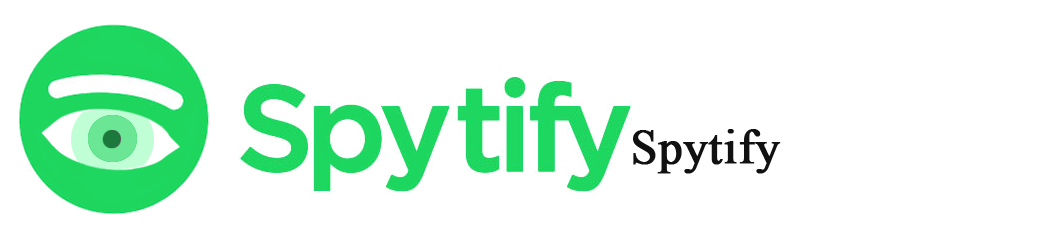
<style>
.page{position:relative;width:1059px;height:236px;background:#ffffff}
.page>*{position:absolute;margin:0}
.t1{font:48px "TimesNewRomanPSMT";color:#111111;font-weight:bold}
</style>
<div class="page">
<p class="t1" style="left:633px;top:129px;width:148px;height:45px">Spytify</p>
</div>
